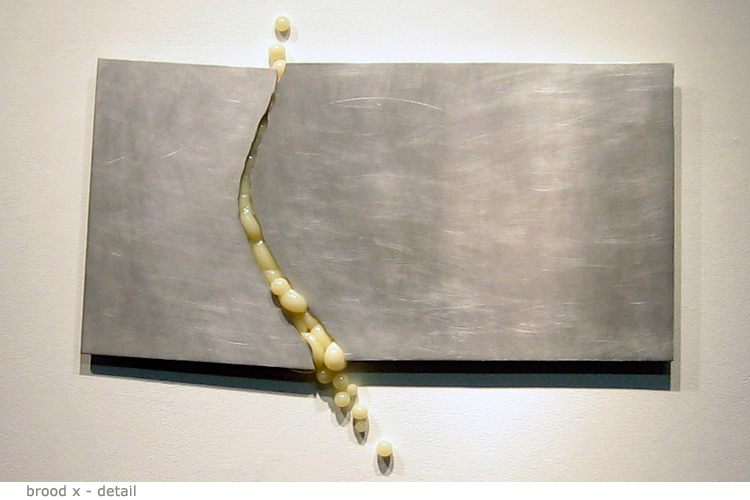
<style>
.page{position:relative;width:750px;height:500px}
.page>*{position:absolute;margin:0}
.t1{font:14px "Verdana";letter-spacing:0.01em;color:#898a7d}
</style>
<div class="page">
<p class="t1" style="left:27px;top:485px;width:109px;height:12px">brood x - detail</p>
</div>
